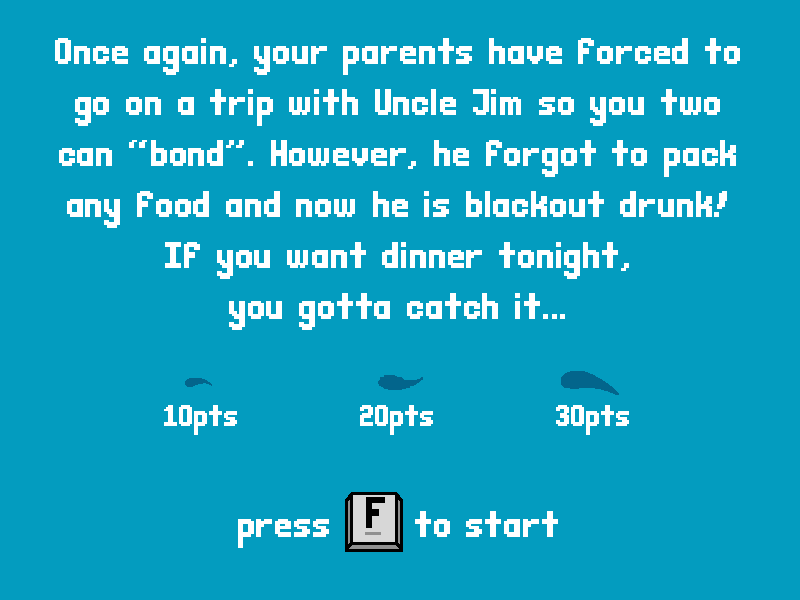
<style>
.page{position:relative;width:800px;height:600px;background:#039cbf}
.page>*{position:absolute;margin:0}
.t1{font:20.8px/51px "CasualEncounter";letter-spacing:0.04em;color:#ffffff}
.t2{font:20.8px/51px "CasualEncounter";letter-spacing:-0.02em;color:#ffffff}
.t3{font:20.8px/38.5px "CasualEncounter";letter-spacing:0.04em;color:#ffffff}
.t4{font:16.7px/0px "CasualEncounter";color:#ffffff}
</style>
<div class="page">
<p class="t1" style="left:55px;top:38px;width:685px;height:510px;text-align:center"><span class="t2"><br></span>Once again, your parents have forced to go on a trip with Uncle Jim so you two can “bond”. However, he forgot to pack any food and now he is blackout drunk! If you want dinner tonight,              you gotta catch it...<br><br><br><span class="t3"><br><br>press      to start</span></p>
<p class="t4" style="left:164px;top:405px;width:465px;height:30px;text-align:center">10pts           20pts           30pts</p>
</div>
